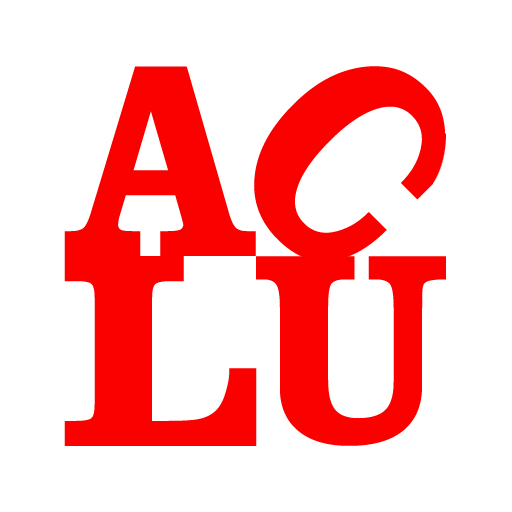
<style>
.page{position:relative;width:512px;height:512px;background:#ffffff}
.page>*{position:absolute;margin:0}
.t1{font:282.3px "ClarendonBT-Bold";letter-spacing:-0.025em;color:#fa0100;scale:0.91 1}
.t2{font:283.2px "ClarendonBT-Bold";letter-spacing:-0.025em;color:#fa0100;scale:1.08 1}
.t3{font:273.9px "ClarendonBT-Bold";letter-spacing:-0.025em;color:#fa0100;scale:0.95 1}
</style>
<div class="page">
<p class="t1" style="left:64px;top:66px;width:192px;height:190px">A</p>
<p class="t2" style="left:64px;top:256px;width:193px;height:190px">L</p>
<p class="t3" style="left:256px;top:256px;width:190px;height:190px">U</p>
</div>
